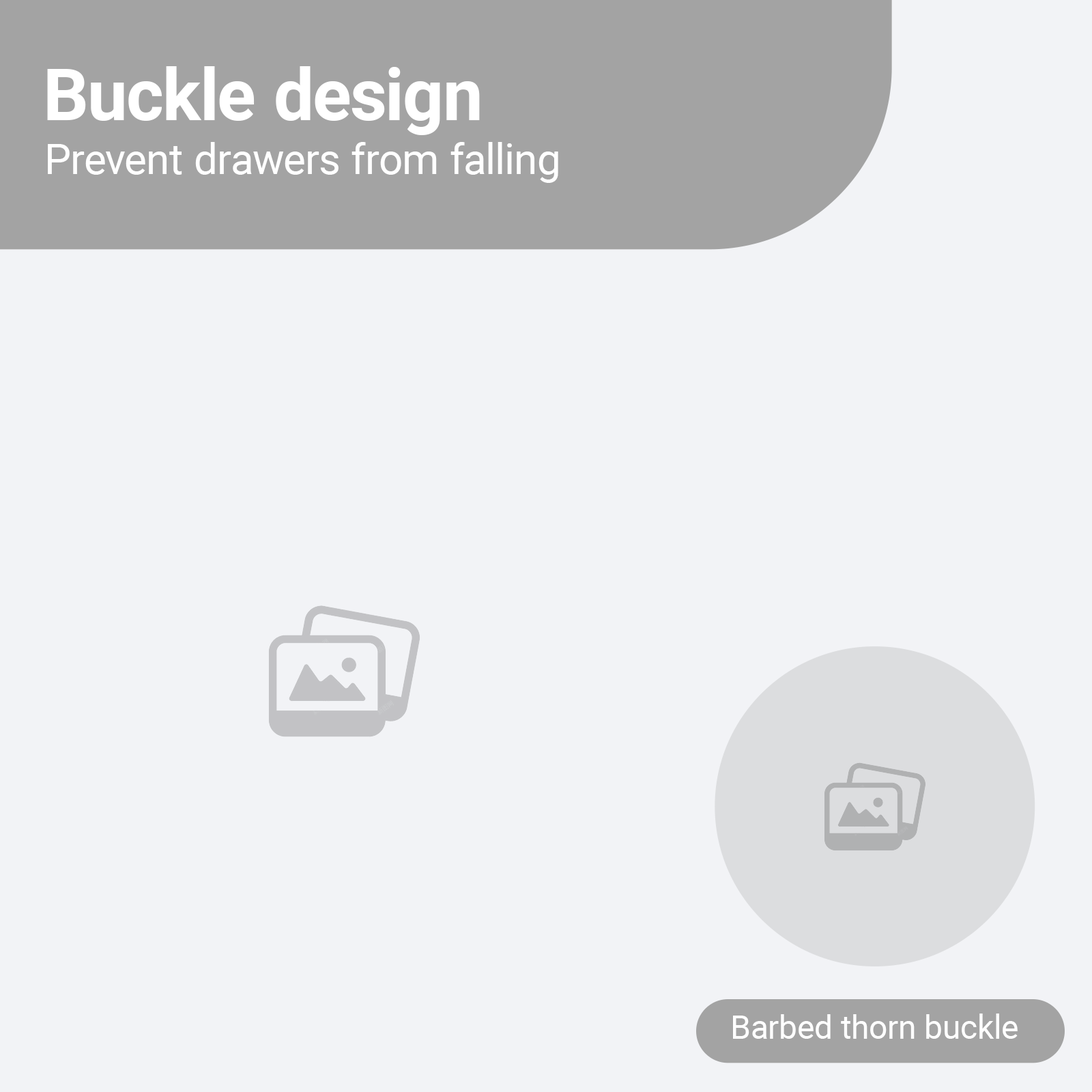
<style>
.page{position:relative;width:1092px;height:1092px;background:#f2f3f6}
.page>*{position:absolute;margin:0}
.t1{font:71.3px "Roboto-Bold";color:#ffffff}
.t2{font:42.2px "Roboto-Regular";color:#ffffff}
.t3{font:32.8px "Roboto-Regular";color:#ffffff}
</style>
<div class="page">
<p class="t1" style="left:47px;top:66px;width:433px;height:69px">Buckle design</p>
<p class="t2" style="left:48px;top:142px;width:510px;height:41px">Prevent drawers from falling</p>
<p class="t3" style="left:733px;top:1013px;width:285px;height:26px">Barbed thorn buckle</p>
</div>
